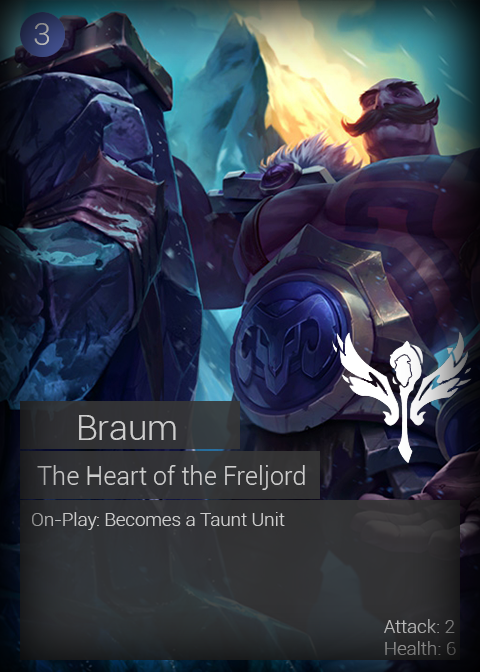
<style>
.page{position:relative;width:480px;height:672px}
.page>*{position:absolute;margin:0}
.t1{font:32px "Roboto-Light"}
.t2{font:34.7px "Roboto-Light";color:#cdcdcd}
.t3{font:25.3px "Roboto-Light";color:#cdcdcd}
.t4{font:18.7px "Roboto-Light";color:#cdcdcd}
.t5{font:18.7px "Roboto-Light"}
</style>
<div class="page">
<p class="t1" style="left:34px;top:23px;width:15px;height:22px">3</p>
<p class="t2" style="left:79px;top:415px;width:97px;height:25px">Braum</p>
<p class="t3" style="left:37px;top:465px;width:268px;height:25px">The Heart of the Freljord</p>
<p class="t4" style="left:32px;top:512px;width:253px;height:18px">On-Play: Becomes a Taunt Unit</p>
<p class="t5" style="left:384px;top:619px;width:72px;height:36px">Attack: 2<br>Health: 6</p>
</div>
